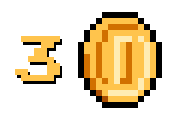
<style>
.page{position:relative;width:174px;height:120px;background:#ffffff}
.page>*{position:absolute;margin:0}
.t1{font:90px "ArcadeClassic";letter-spacing:-0.05em;color:#ffc44d}
</style>
<div class="page">
<p class="t1" style="left:15px;top:36px;width:45px;height:45px">3</p>
</div>
